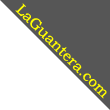
<style>
.page{position:relative;width:110px;height:110px;background:#ffffff}
.page>*{position:absolute;margin:0}
.t1{font:15.3px "BookmanOldStyle";color:#fffc00}
</style>
<div class="page">
<p class="t1" style="left:15px;top:3px;width:92px;height:96px;rotate:45deg">LaGuantera.com</p>
</div>
